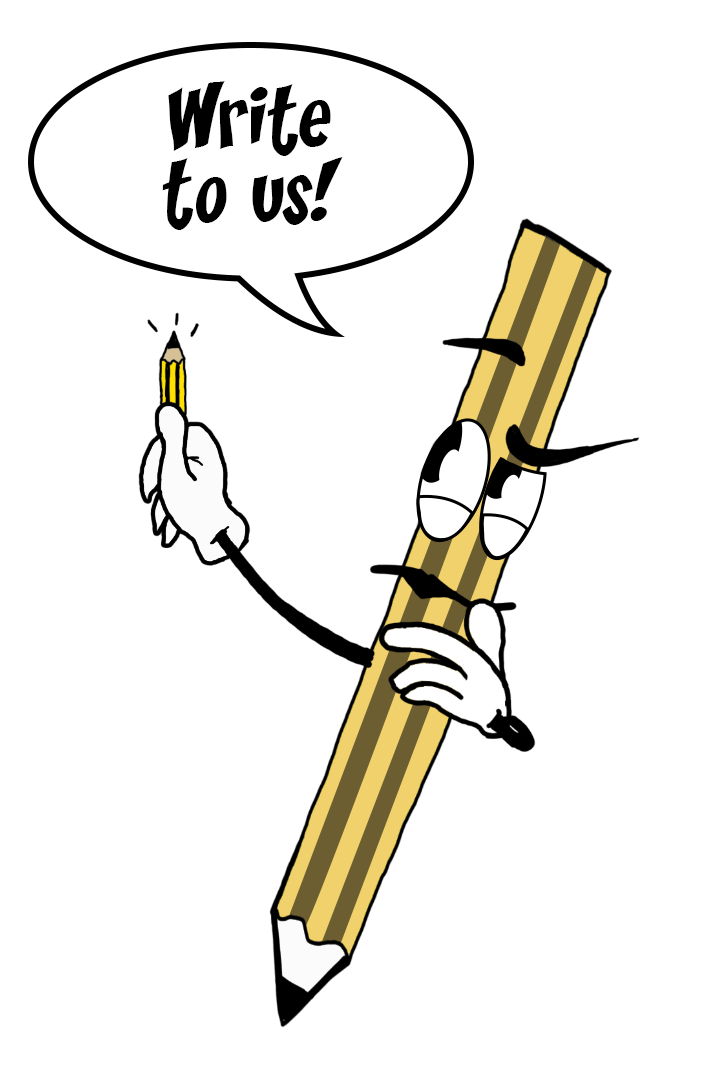
<style>
.page{position:relative;width:711px;height:1077px;background:#ffffff}
.page>*{position:absolute;margin:0}
.t1{font:77.7px/74.3px "Yikes";color:#000000}
</style>
<div class="page">
<p class="t1" style="left:162px;top:81px;width:181px;height:149px;text-align:justify">Write<br>to us!</p>
</div>
